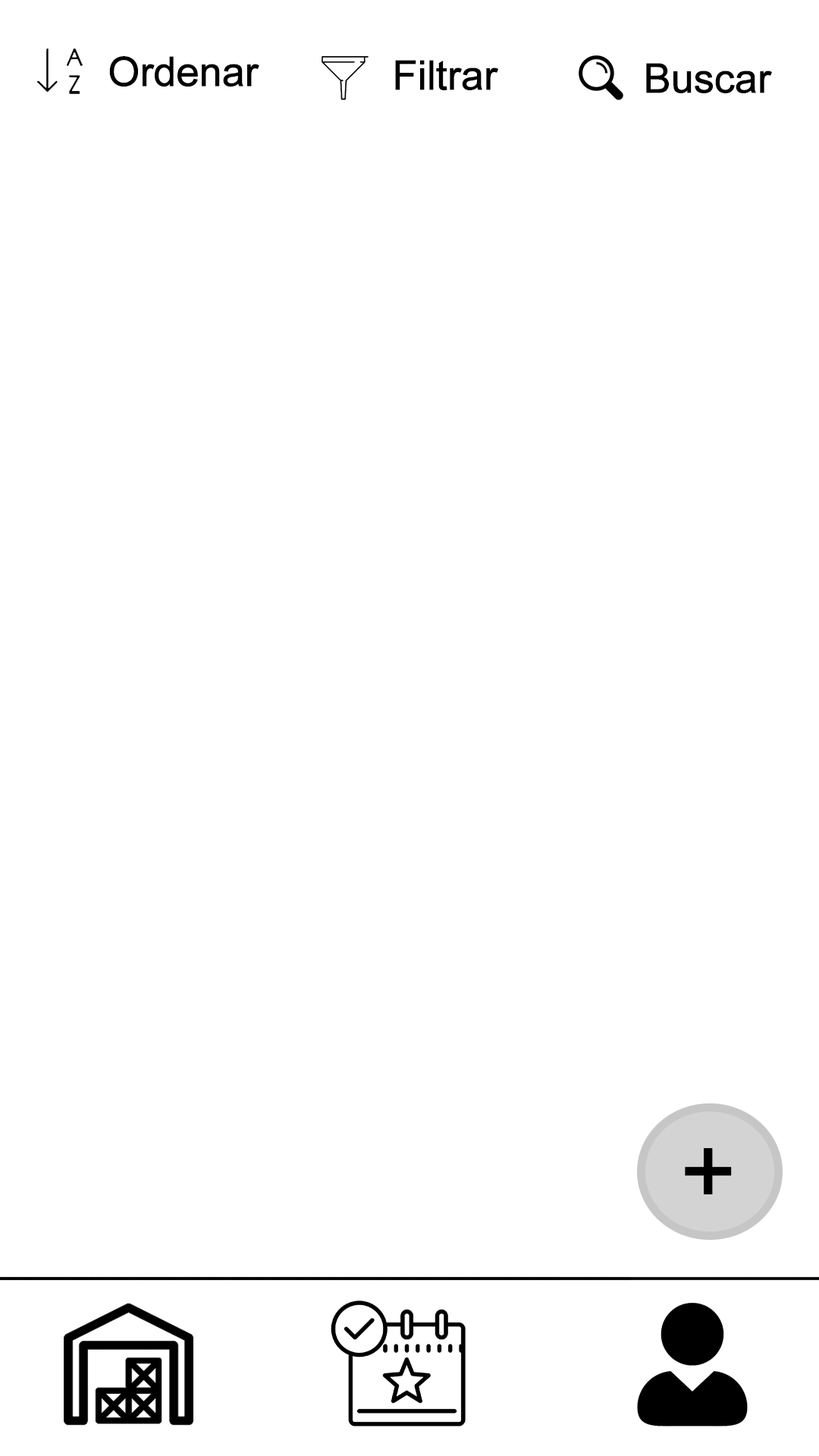
<style>
.page{position:relative;width:819px;height:1456px;background:#ffffff}
.page>*{position:absolute;margin:0}
.t1{font:40.8px "ArialMT";letter-spacing:-0.025em;color:#000000;font-weight:bold}
.t2{font:95.5px "ArialMT";letter-spacing:-0.025em;color:#000000;font-weight:bold}
</style>
<div class="page">
<p class="t1" style="left:109px;top:56px;width:150px;height:31px">Ordenar</p>
<p class="t1" style="left:395px;top:60px;width:103px;height:30px">Filtrar</p>
<p class="t1" style="left:646px;top:63px;width:126px;height:30px">Buscar</p>
<p class="t2" style="left:685px;top:1148px;width:47px;height:46px">+</p>
</div>
